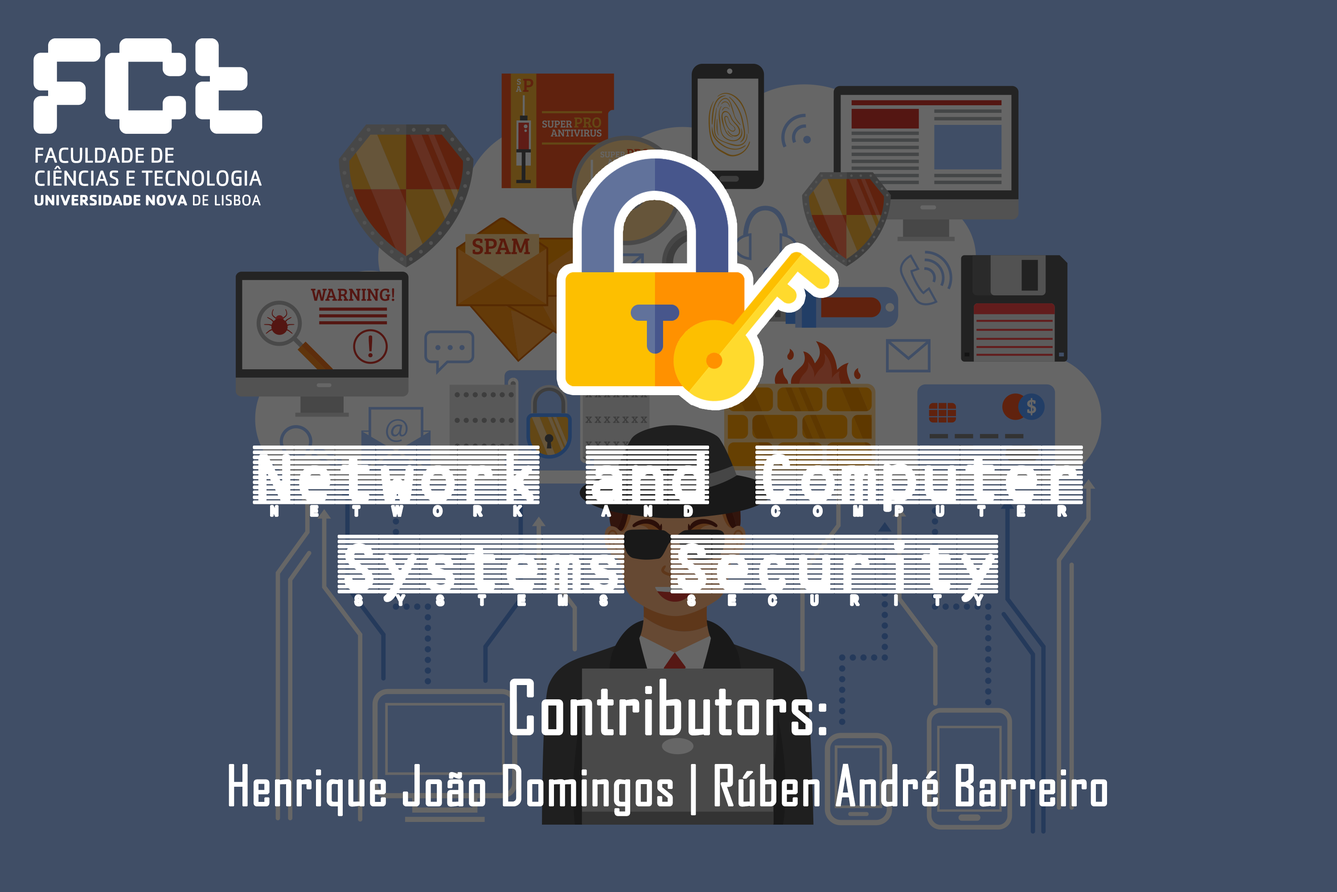
<style>
.page{position:relative;width:1337px;height:892px;background:#404e66}
.page>*{position:absolute;margin:0}
.t1{font:62.4px/89.2px "HighSecurity-Regular";color:#ffffff;font-weight:bold}
.t2{font:53.5px/71.3px "AgencyFB-Reg";color:#ffffff;font-weight:bold}
.t3{font:71.3px/71.3px "AgencyFB-Reg";color:#ffffff;font-weight:bold}
</style>
<div class="page">
<p class="t1" style="left:253px;top:445px;width:830px;height:161px;text-align:center">Network and Computer Systems Security Labs</p>
<p class="t2" style="left:229px;top:678px;width:878px;height:138px;text-align:center"><span class="t3">Contributors:<br></span>Henrique João Domingos | Rúben André Barreiro</p>
</div>
